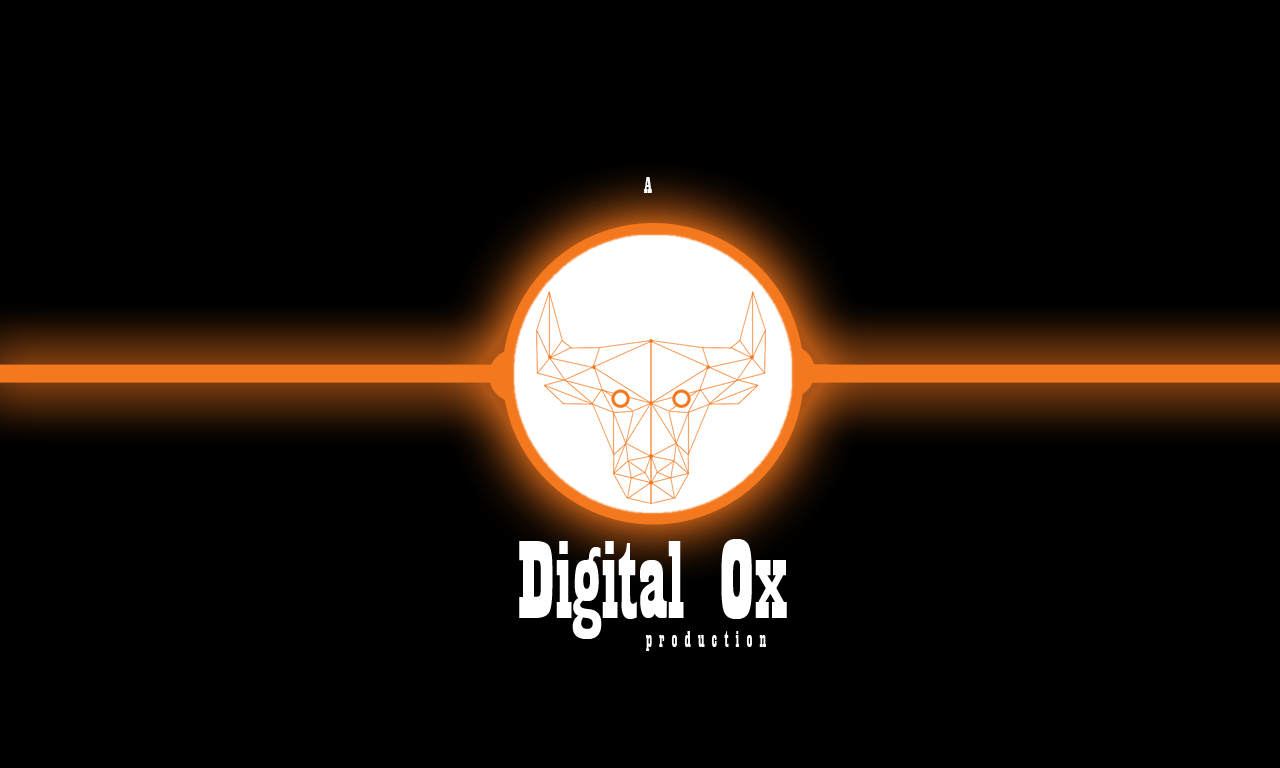
<style>
.page{position:relative;width:1280px;height:768px;background:#000000}
.page>*{position:absolute;margin:0}
.t1{font:24px "Playbill";color:#ffffff}
.t2{font:116px "Playbill";color:#ffffff}
</style>
<div class="page">
<p class="t1" style="left:644px;top:177px;width:8px;height:16px">A</p>
<p class="t1" style="left:519px;top:539px;width:268px;height:112px;text-align:center"><span class="t2">Digital Ox<br></span>               p r o d u c t i o n</p>
</div>
